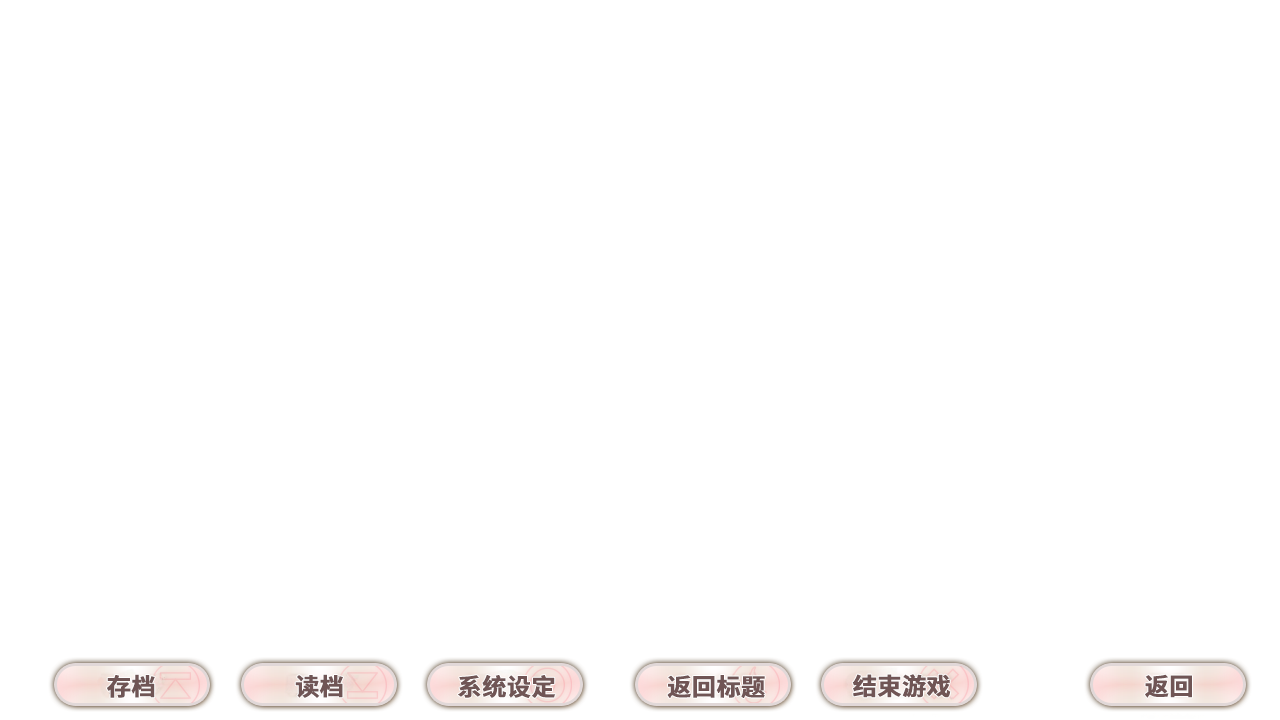
<style>
.page{position:relative;width:1280px;height:720px;background:#ffffff}
.page>*{position:absolute;margin:0}
.t1{font:24px "SourceHanSansSC-Bold";color:#705555;font-weight:bold}
</style>
<div class="page">
<p class="t1" style="left:107px;top:674px;width:48px;height:24px">存档</p>
<p class="t1" style="left:295px;top:674px;width:48px;height:24px">读档</p>
<p class="t1" style="left:458px;top:675px;width:98px;height:23px">系统设定</p>
<p class="t1" style="left:667px;top:675px;width:98px;height:23px">返回标题</p>
<p class="t1" style="left:852px;top:674px;width:99px;height:24px">结束游戏</p>
<p class="t1" style="left:1145px;top:674px;width:47px;height:24px">返回</p>
</div>
